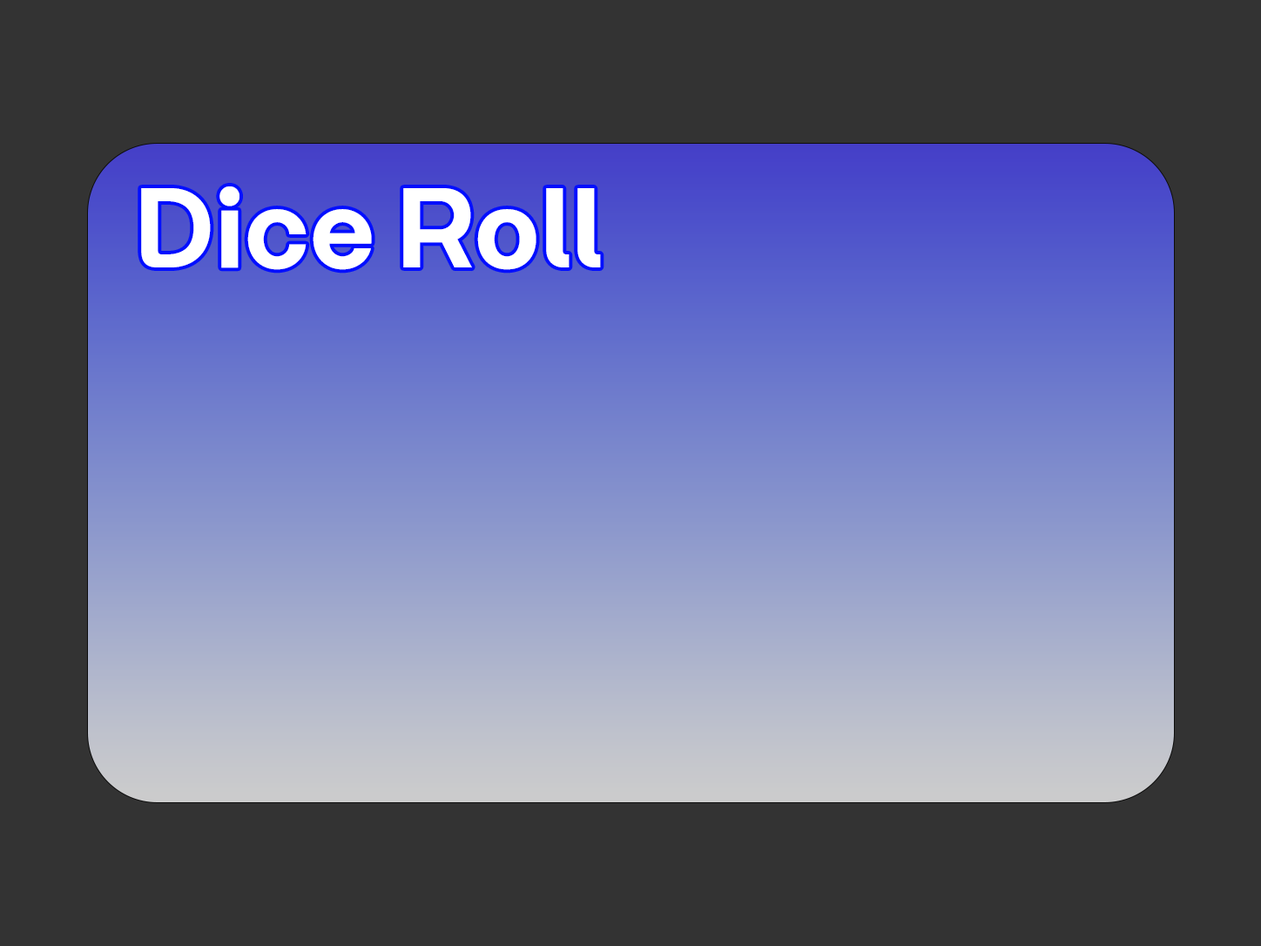
<style>
.page{position:relative;width:1261px;height:946px;background:#333333}
.page>*{position:absolute;margin:0}
.t1{font:87.1px "RiaSans-Bold";color:#ffffff}
</style>
<div class="page">
<p class="t1" style="left:141px;top:186px;width:460px;height:84px">Dice Roll</p>
</div>
